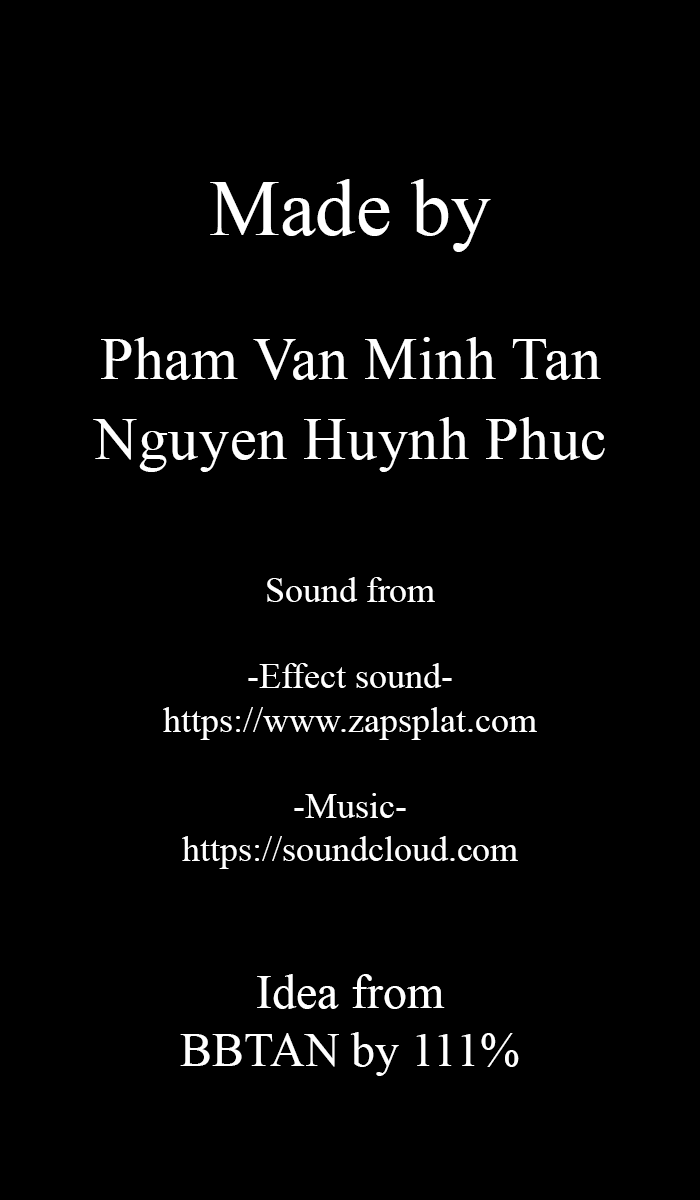
<style>
.page{position:relative;width:700px;height:1200px;background:#000000}
.page>*{position:absolute;margin:0}
.t1{font:80.2px "TimesNewRomanPSMT";color:#ffffff}
.t2{font:60px/80px "TimesNewRomanPSMT";letter-spacing:0.01em;color:#ffffff}
.t3{font:36px "TimesNewRomanPSMT";color:#ffffff}
.t4{font:48px "TimesNewRomanPSMT";color:#ffffff}
</style>
<div class="page">
<p class="t1" style="left:210px;top:179px;width:281px;height:73px">Made by</p>
<p class="t2" style="left:93px;top:337px;width:512px;height:135px;text-align:center">Pham Van Minh Tan<br>Nguyen Huynh Phuc</p>
<p class="t3" style="left:163px;top:577px;width:374px;height:292px;text-align:center">Sound from<br><br>-Effect sound-<br>https://www.zapsplat.com<br><br>-Music-<br>https://soundcloud.com</p>
<p class="t4" style="left:180px;top:974px;width:339px;height:102px;text-align:center">Idea from<br>BBTAN by 111%</p>
</div>
